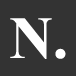
<style>
.page{position:relative;width:76px;height:76px;background:#333333}
.page>*{position:absolute;margin:0}
.t1{font:60px "TimesNewRomanPS-BoldMT";color:#ffffff}
</style>
<div class="page">
<p class="t1" style="left:10px;top:18px;width:56px;height:41px">N.</p>
</div>
